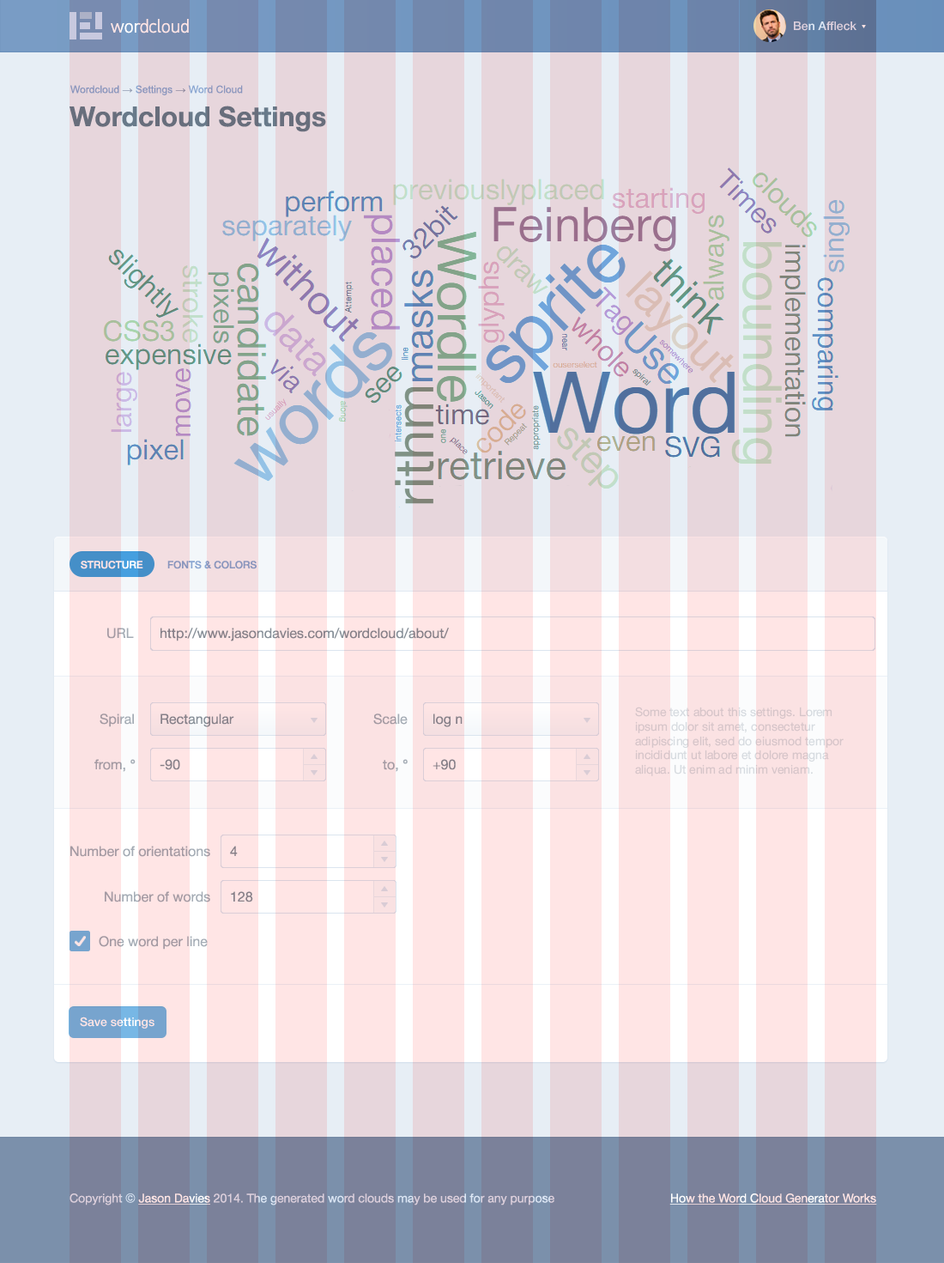
<style>
.page{position:relative;width:944px;height:1263px}
.page>*{position:absolute;margin:0}
.t1{font:18.9px "PFDinTextPro-Light";color:#ffe5e5}
.t2{font:12px "HelveticaNeue-Medium";color:#dccfdc}
.t3{font:10.3px "ArialMT";color:#89a6d2}
.t4{font:10.3px "ArialMT";color:#909bb2}
.t5{font:27.5px "HelveticaNeue-Bold";color:#687a8a}
.t6{font:10.3px "HelveticaNeue-Medium";text-transform:uppercase}
.t7{font:10.3px "HelveticaNeue-Medium";color:#89a6d2;text-transform:uppercase}
.t8{font:13.7px "HelveticaNeue-Roman";color:#a4acb5;text-transform:uppercase}
.t9{font:13.7px "HelveticaNeue-Roman";color:#868f98}
.t10{font:13.7px "HelveticaNeue-Roman";color:#a4acb5}
.t11{font:12px "HelveticaNeue-Roman";color:#d6c5c9}
.t12{font:12px "HelveticaNeue-Medium";color:#ffe5e5}
.t13{font:12px "HelveticaNeue-Roman"}
.t14{font:12px "HelveticaNeue-Roman";text-decoration:underline}
.t15{font:12px "HelveticaNeue-Roman";color:#ffe5e5;text-decoration:underline}
</style>
<div class="page">
<p class="t1" style="left:111px;top:19px;width:78px;height:14px">wordcloud</p>
<p class="t2" style="left:794px;top:21px;width:63px;height:10px">Ben Affleck</p>
<p class="t3" style="left:70px;top:85px;width:173px;height:10px">Wordcloud<span class="t4"> → </span>Settings<span class="t4"> → </span>Word Cloud</p>
<p class="t5" style="left:70px;top:106px;width:256px;height:26px">Wordcloud Settings</p>
<p class="t6" style="left:81px;top:561px;width:62px;height:8px">structure</p>
<p class="t7" style="left:167px;top:561px;width:90px;height:8px">fonts &amp; colors</p>
<p class="t8" style="left:107px;top:628px;width:27px;height:11px">URL</p>
<p class="t9" style="left:161px;top:628px;width:288px;height:13px">http://www.jasondavies.com/wordcloud/about/</p>
<p class="t10" style="left:100px;top:713px;width:34px;height:14px">Spiral</p>
<p class="t9" style="left:161px;top:713px;width:73px;height:14px">Rectangular</p>
<p class="t10" style="left:373px;top:713px;width:35px;height:12px">Scale</p>
<p class="t9" style="left:434px;top:713px;width:29px;height:14px">log n</p>
<p class="t11" style="left:635px;top:707px;width:209px;height:69px">Some text about this settings. Lorem ipsum dolor sit amet, consectetur adipiscing elit, sed do eiusmod tempor incididunt ut labore et dolore magna aliqua. Ut enim ad minim veniam.</p>
<p class="t10" style="left:94px;top:759px;width:42px;height:13px">from, °</p>
<p class="t9" style="left:160px;top:759px;width:20px;height:11px">-90</p>
<p class="t10" style="left:383px;top:759px;width:25px;height:13px">to, °</p>
<p class="t9" style="left:433px;top:759px;width:23px;height:11px">+90</p>
<p class="t10" style="left:70px;top:846px;width:140px;height:11px">Number of orientations</p>
<p class="t9" style="left:230px;top:846px;width:8px;height:10px">4</p>
<p class="t10" style="left:105px;top:891px;width:105px;height:11px">Number of words</p>
<p class="t9" style="left:231px;top:891px;width:22px;height:11px">128</p>
<p class="t10" style="left:99px;top:936px;width:109px;height:13px">One word per line</p>
<p class="t12" style="left:80px;top:1016px;width:75px;height:12px">Save settings</p>
<p class="t13" style="left:70px;top:1193px;width:485px;height:12px">Copyright © <span class="t14">Jason Davies</span> 2014. The generated word clouds may be used for any purpose</p>
<p class="t15" style="left:670px;top:1193px;width:207px;height:11px">How the Word Cloud Generator Works</p>
</div>
